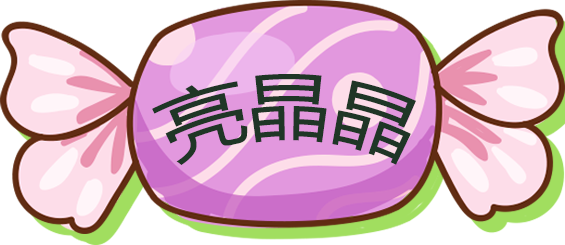
<style>
.page{position:relative;width:565px;height:245px}
.page>*{position:absolute;margin:0}
.t1{font:72px "MicrosoftYaHei";color:#1f3626}
</style>
<div class="page">
<p class="t1" style="left:152px;top:74px;width:264px;height:91px">亮晶晶</p>
</div>
